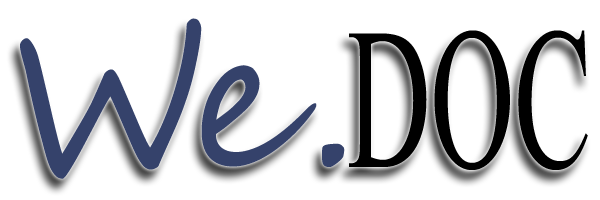
<style>
.page{position:relative;width:600px;height:200px;background:#ffffff}
.page>*{position:absolute;margin:0}
.t1{font:190px "SegoeScript";color:#35426b}
.t2{font:243.9px "ShonarBangla";color:#000000;scale:0.57 1}
</style>
<div class="page">
<p class="t1" style="left:20px;top:18px;width:325px;height:161px">We.</p>
<p class="t2" style="left:349px;top:30px;width:239px;height:140px">DOC</p>
</div>
